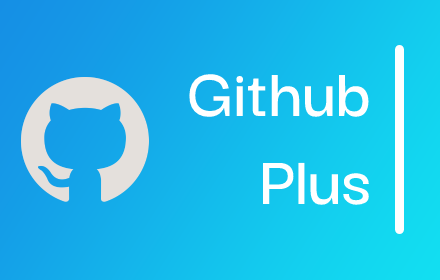
<style>
.page{position:relative;width:440px;height:280px}
.page>*{position:absolute;margin:0}
.t1{font:73px "DarkerGrotesque-SemiBold";color:#ffffff}
</style>
<div class="page">
<p class="t1" style="left:189px;top:74px;width:180px;height:131px;text-align:right">Github<br>Plus</p>
</div>
